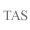
<style>
.page{position:relative;width:30px;height:30px;background:#ffffff}
.page>*{position:absolute;margin:0}
.t1{font:14px "TimesNewRomanPSMT";color:#666666}
</style>
<div class="page">
<p class="t1" style="left:3px;top:10px;width:25px;height:11px">TAS</p>
</div>
